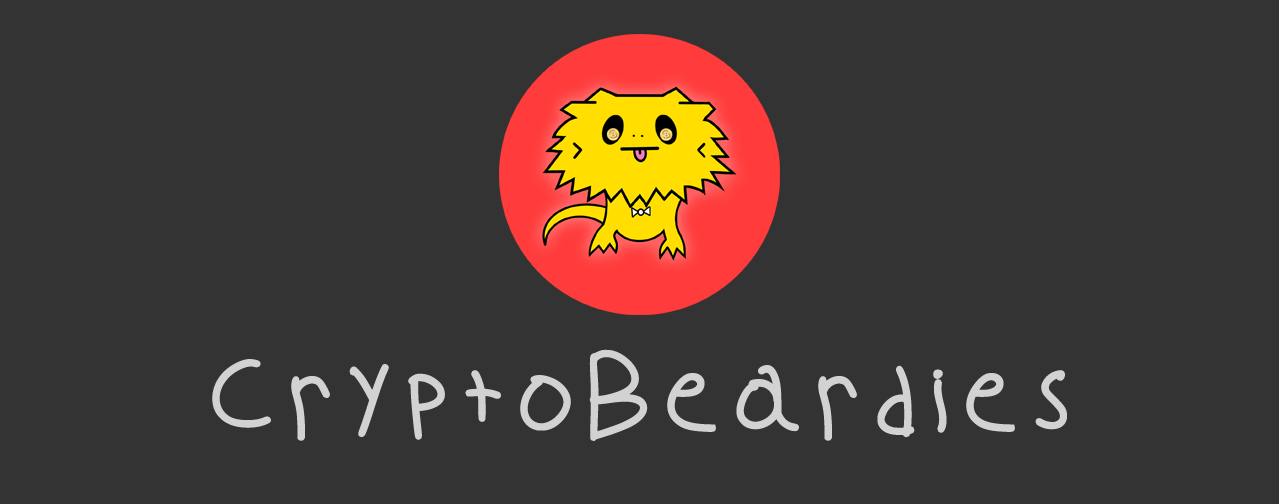
<style>
.page{position:relative;width:1279px;height:504px;background:#333333}
.page>*{position:absolute;margin:0}
.t1{font:133.3px "Kids-Regular";letter-spacing:0.04em;color:#d2d2d2;font-weight:bold}
</style>
<div class="page">
<p class="t1" style="left:212px;top:349px;width:855px;height:92px">CryptoBeardies</p>
</div>
